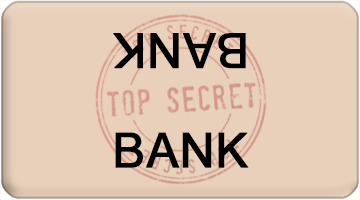
<style>
.page{position:relative;width:360px;height:200px;background:#e8d0bb}
.page>*{position:absolute;margin:0}
.t1{font:48px "ArialMT";color:#000000;font-weight:bold}
</style>
<div class="page">
<p class="t1" style="left:113px;top:33px;width:133px;height:36px;rotate:180deg">BANK</p>
<p class="t1" style="left:115px;top:132px;width:134px;height:36px">BANK</p>
</div>
